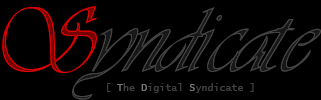
<style>
.page{position:relative;width:321px;height:100px;background:#000000}
.page>*{position:absolute;margin:0}
.t1{font:89.1px "Astrania";scale:0.91 1}
.t2{font:10px "LucidaConsole";color:#414141}
.t3{font:10px "LucidaConsole";color:#767676}
</style>
<div class="page">
<p class="t1" style="left:2px;top:6px;width:95px;height:67px">S</p>
<p class="t1" style="left:72px;top:7px;width:249px;height:93px">yndicate</p>
<p class="t2" style="left:107px;top:83px;width:147px;height:10px">[ <span class="t3">T</span>he <span class="t3">D</span>igital <span class="t3">S</span>yndicate ]</p>
</div>
